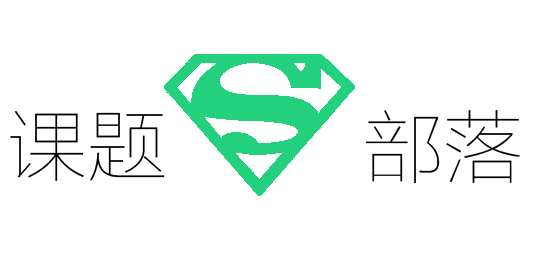
<style>
.page{position:relative;width:540px;height:258px;background:#ffffff}
.page>*{position:absolute;margin:0}
.t1{font:80px "FZLTCXHJW--GB1-0";color:#000000}
</style>
<div class="page">
<p class="t1" style="left:10px;top:111px;width:155px;height:70px">课题</p>
<p class="t1" style="left:365px;top:110px;width:155px;height:74px">部落</p>
</div>
